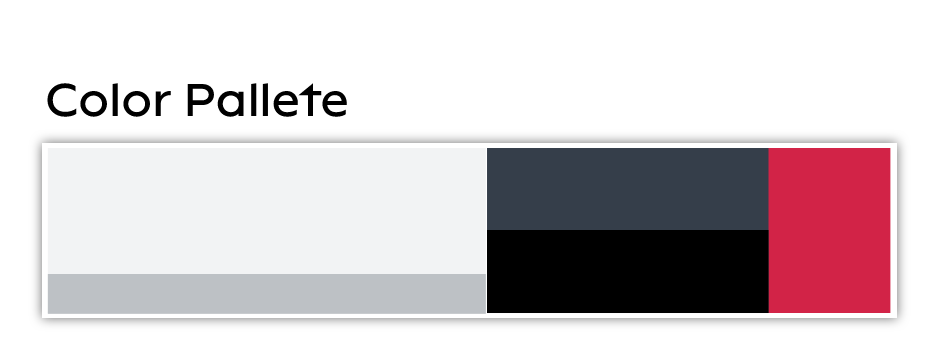
<style>
.page{position:relative;width:949px;height:357px;background:#ffffff}
.page>*{position:absolute;margin:0}
.t1{font:47.1px "Lack-Regular";color:#000000}
</style>
<div class="page">
<p class="t1" style="left:47px;top:83px;width:300px;height:34px">Color Pallete</p>
</div>
